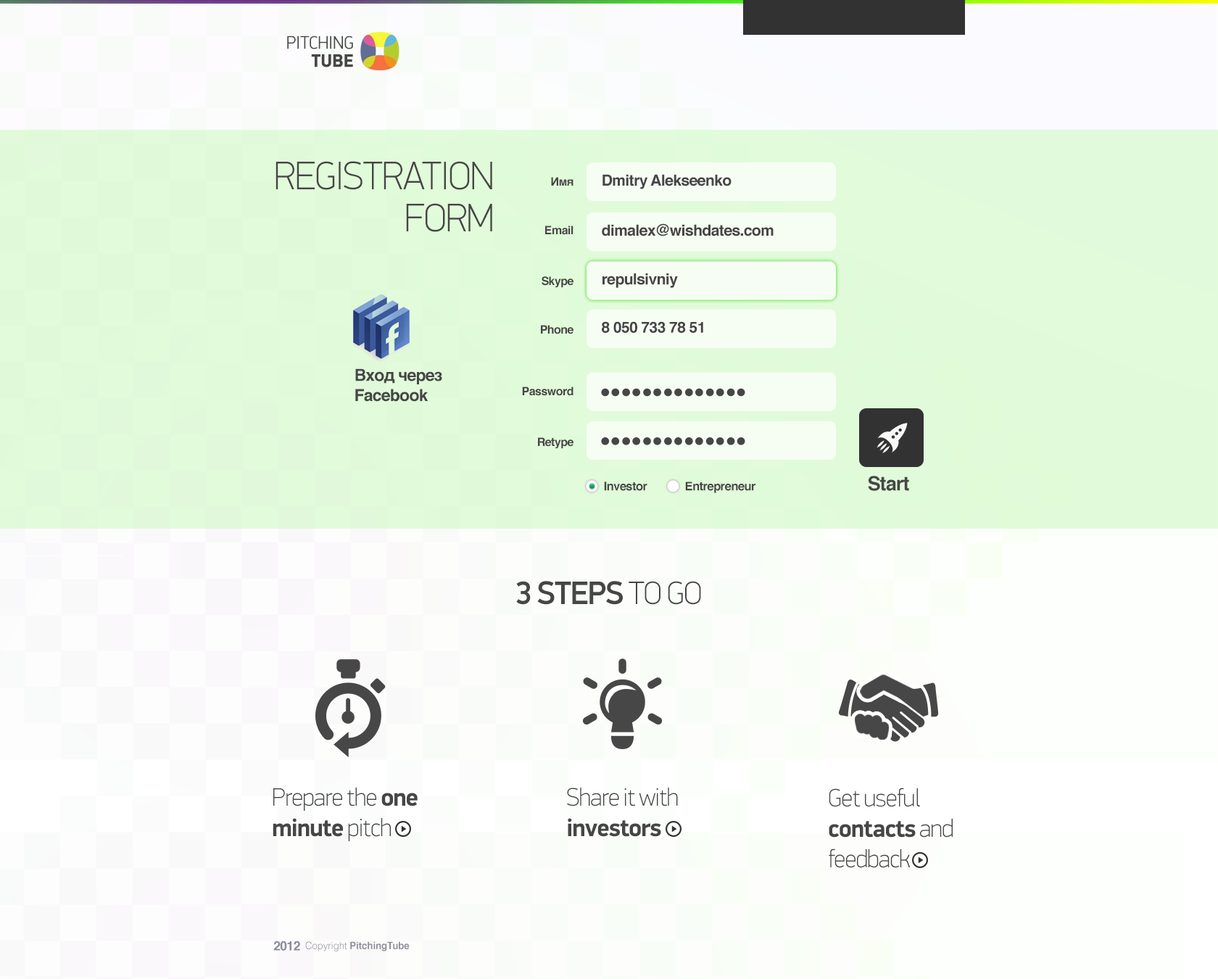
<style>
.page{position:relative;width:1218px;height:979px}
.page>*{position:absolute;margin:0}
.t1{font:18.3px/18.1px "DinDisplayProPF-Light";color:#464646;text-transform:uppercase;scale:0.96 1}
.t2{font:18.3px/18.1px "DinDisplayProPF-Black";color:#464646;text-transform:uppercase;scale:0.96 1}
.t3{font:39.9px/42.1px "DinDisplayProPF-Thin";letter-spacing:-0.03em;color:#464646}
.t4{font:11.6px "Helvetica-Bold";letter-spacing:-0.03em;color:#464646}
.t5{font:15.4px "Helvetica-Bold";letter-spacing:-0.03em;color:#464646}
.t6{font:16.7px "Helvetica-Bold";letter-spacing:-0.03em;color:#464646}
.t7{font:12px "Helvetica-Bold";letter-spacing:-0.03em;color:#464646}
.t8{font:19.6px "Helvetica-Bold";letter-spacing:-0.03em;color:#464646}
.t9{font:32.6px "DinDisplayProPF-Medium";letter-spacing:-0.03em;color:#464646;text-transform:uppercase}
.t10{font:32.6px "DinDisplayProPF-Thin";letter-spacing:-0.03em;color:#464646;text-transform:uppercase}
.t11{font:25.4px "DinDisplayProPF-Thin";letter-spacing:-0.03em;color:#464646}
.t12{font:25.4px "DinDisplayProPF-Bold";letter-spacing:-0.03em;color:#464646}
.t13{font:12.7px "Helvetica-Bold";letter-spacing:-0.025em;color:#8b8b9a}
.t14{font:9.9px "Helvetica-Bold";color:#8b8c99;scale:0.96 1}
.t15{font:9.9px "Helvetica-Light";color:#8b8c99;scale:0.96 1}
</style>
<div class="page">
<p class="t1" style="left:287px;top:36px;width:66px;height:31px;text-align:right">Pitching<br><span class="t2">Tube</span></p>
<p class="t3" style="left:276px;top:161px;width:216px;height:71px;text-align:right">REGISTRATION<br>FORM</p>
<p class="t4" style="left:551px;top:177px;width:23px;height:9px">Имя</p>
<p class="t5" style="left:603px;top:174px;width:129px;height:15px">Dmitry Alekseenko</p>
<p class="t4" style="left:545px;top:226px;width:29px;height:9px">Email</p>
<p class="t5" style="left:602px;top:223px;width:172px;height:13px">dimalex@wishdates.com</p>
<p class="t4" style="left:542px;top:276px;width:32px;height:12px">Skype</p>
<p class="t5" style="left:603px;top:273px;width:75px;height:15px">repulsivniy</p>
<p class="t4" style="left:541px;top:325px;width:33px;height:9px">Phone</p>
<p class="t5" style="left:602px;top:321px;width:101px;height:12px">8 050 733 78 51</p>
<p class="t6" style="left:355px;top:368px;width:87px;height:34px">Вход через <br>Facebook</p>
<p class="t4" style="left:522px;top:386px;width:52px;height:10px">Password</p>
<p class="t4" style="left:538px;top:437px;width:36px;height:12px">Retype</p>
<p class="t7" style="left:604px;top:481px;width:44px;height:10px">Investor</p>
<p class="t7" style="left:685px;top:481px;width:71px;height:12px">Entrepreneur</p>
<p class="t8" style="left:868px;top:476px;width:41px;height:15px">Start</p>
<p class="t9" style="left:516px;top:581px;width:185px;height:24px">3 steps<span class="t10"> to go</span></p>
<p class="t11" style="left:273px;top:787px;width:145px;height:54px">Prepare the <span class="t12">one <br>minute</span> pitch</p>
<p class="t11" style="left:567px;top:787px;width:111px;height:50px">Share it with <br><span class="t12">investors</span></p>
<p class="t11" style="left:829px;top:787px;width:124px;height:81px">Get useful <br><span class="t12">contacts </span>and <br>feedback</p>
<p class="t13" style="left:273px;top:940px;width:27px;height:11px">2012</p>
<p class="t14" style="left:305px;top:941px;width:105px;height:10px"><span class="t15">Copyright </span>PitchingTube</p>
</div>
